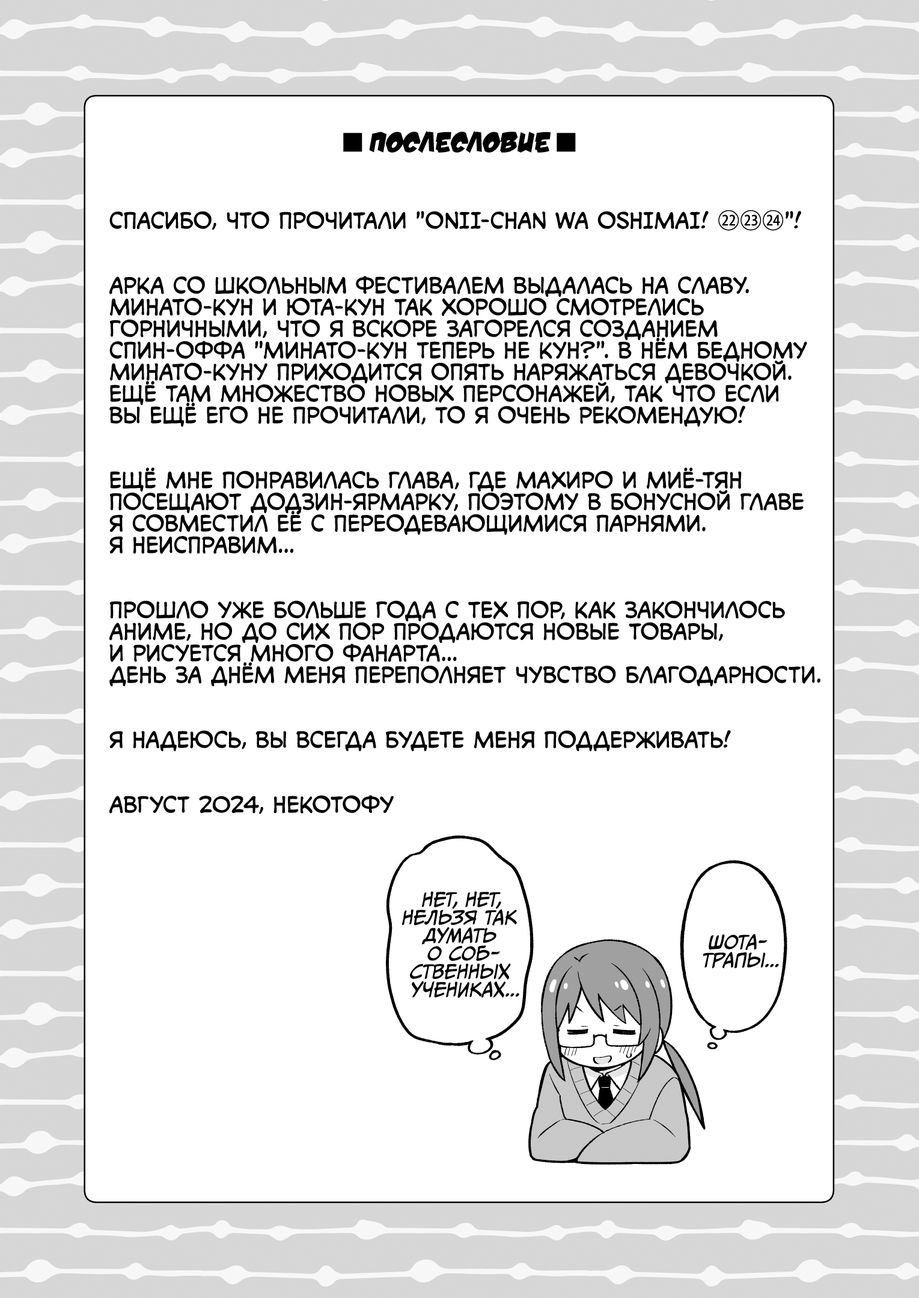
<style>
.page{position:relative;width:919px;height:1298px;background:#ffffff}
.page>*{position:absolute;margin:0}
.t1{font:28.8px "v_DamnNoisyKids";color:#000000;text-transform:uppercase}
.t2{font:21.6px "v_CCMonologous";color:#000000;text-transform:uppercase}
.t3{font:21.6px "KozGoPr6N-Regular";color:#000000;text-transform:uppercase;font-weight:bold}
.t4{font:18px "CCMeanwhile";color:#000000;text-transform:uppercase;font-style:italic}
</style>
<div class="page">
<p class="t1" style="left:369px;top:131px;width:181px;height:22px">Послесловие</p>
<p class="t2" style="left:109px;top:210px;width:711px;height:604px">Спасибо, что прочитали "Onii-chan wa Oshimai! <span class="t3">㉒㉓㉔</span>"!<br><br><br>Арка со школьным фестивалем выдалась на славу.<br>Минато-кун и Юта-кун так хорошо смотрелись<br>горничными, что я вскоре загорелся созданием<br>спин-оффа "Минато-кун теперь не кун?". В нём бедному<br>Минато-куну приходится опять наряжаться девочкой.<br>Ещё там множество новых персонажей, так что если<br>вы ещё его не прочитали, то я очень рекомендую!<br><br><br>Ещё мне понравилась глава, где Махиро и Миё-тян<br>посещают додзин-ярмарку, поэтому в бонусной главе<br>я совместил её с переодевающимися парнями.<br>Я неисправим...<br><br><br>Прошло уже больше года с тех пор, как закончилось<br>аниме, но до сих пор продаются новые товары,<br>и рисуется много фанарта...<br>День за днём меня переполняет чувство благодарности.<br><br><br>Я надеюсь, вы всегда будете меня поддерживать!<br><br><br>Август 2024, Некотофу</p>
<p class="t4" style="left:402px;top:891px;width:117px;height:107px;text-align:center">Нет, нет,<br>нельзя так<br>думать<br>о соб-<br>ственных<br>учениках...</p>
<p class="t4" style="left:702px;top:934px;width:77px;height:35px;text-align:center">Шота-<br>трапы...</p>
</div>
